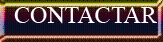
<style>
.page{position:relative;width:163px;height:42px}
.page>*{position:absolute;margin:0}
.t1{font:24px "TimesNewRomanPSMT";color:#ffffff}
</style>
<div class="page">
<p class="t1" style="left:14px;top:3px;width:143px;height:27px">CONTACTAR</p>
</div>
